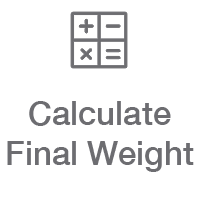
<style>
.page{position:relative;width:200px;height:200px;background:#ffffff}
.page>*{position:absolute;margin:0}
.t1{font:33px "HelveticaNeue-Medium";color:#6d6d71}
</style>
<div class="page">
<p class="t1" style="left:7px;top:101px;width:187px;height:71px;text-align:center">Calculate<br>Final Weight</p>
</div>
